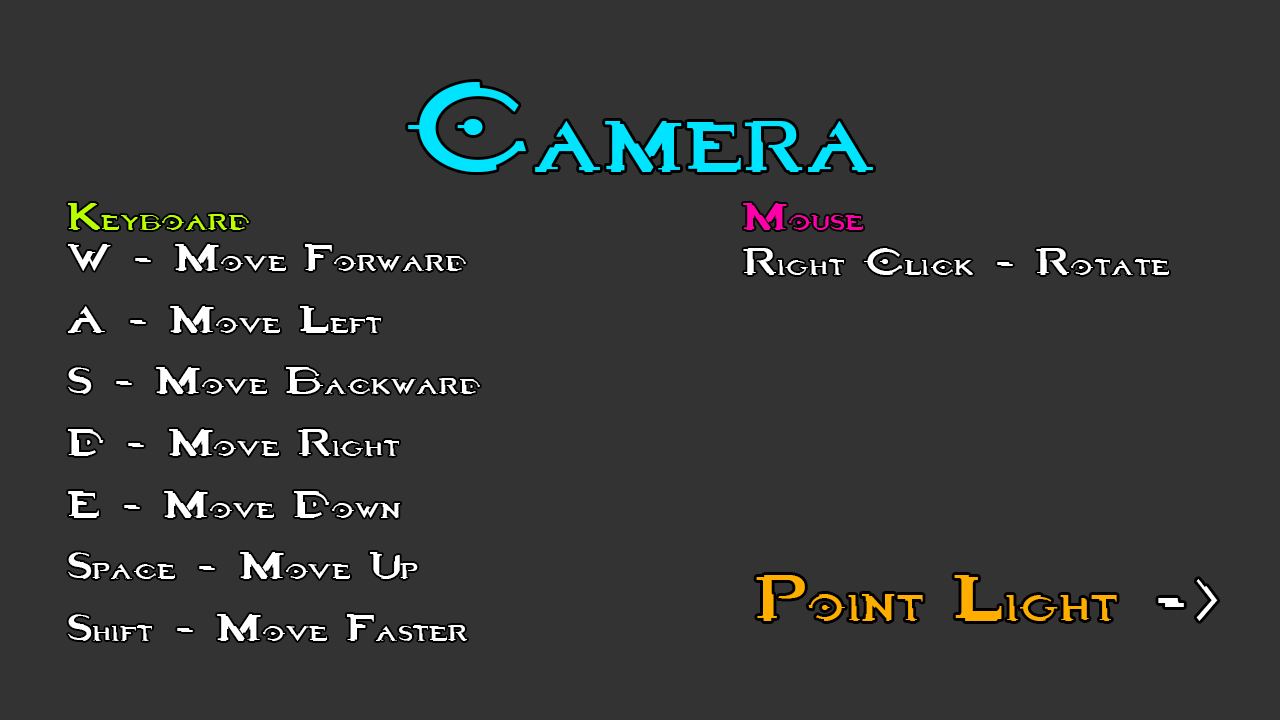
<style>
.page{position:relative;width:1280px;height:720px;background:#333333}
.page>*{position:absolute;margin:0}
.t1{font:169.3px "Halo3";color:#00e4ff;scale:0.64 1}
.t2{font:51.4px "Halo3";color:#baff00;scale:0.68 1}
.t3{font:51.4px "Halo3";color:#ff00a8;scale:0.68 1}
.t4{font:51.4px "Halo3";color:#ffffff;scale:0.68 1}
.t5{font:87.9px "Halo3";color:#ffae00;scale:0.67 1}
.t6{font:87.9px "Halo3";color:#ffffff;scale:0.67 1}
</style>
<div class="page">
<p class="t1" style="left:408px;top:82px;width:465px;height:90px">Camera</p>
<p class="t2" style="left:68px;top:203px;width:181px;height:27px">Keyboard</p>
<p class="t3" style="left:743px;top:203px;width:120px;height:27px">Mouse</p>
<p class="t4" style="left:68px;top:244px;width:412px;height:397px">W - Move Forward<br>A - Move Left<br>S - Move Backward<br>D - Move Right<br>E - Move Down<br>Space - Move Up<br>Shift - Move Faster</p>
<p class="t4" style="left:743px;top:248px;width:426px;height:27px">Right Click - Rotate</p>
<p class="t5" style="left:756px;top:575px;width:462px;height:46px">Point Light<span class="t6"> -&gt;</span></p>
</div>
